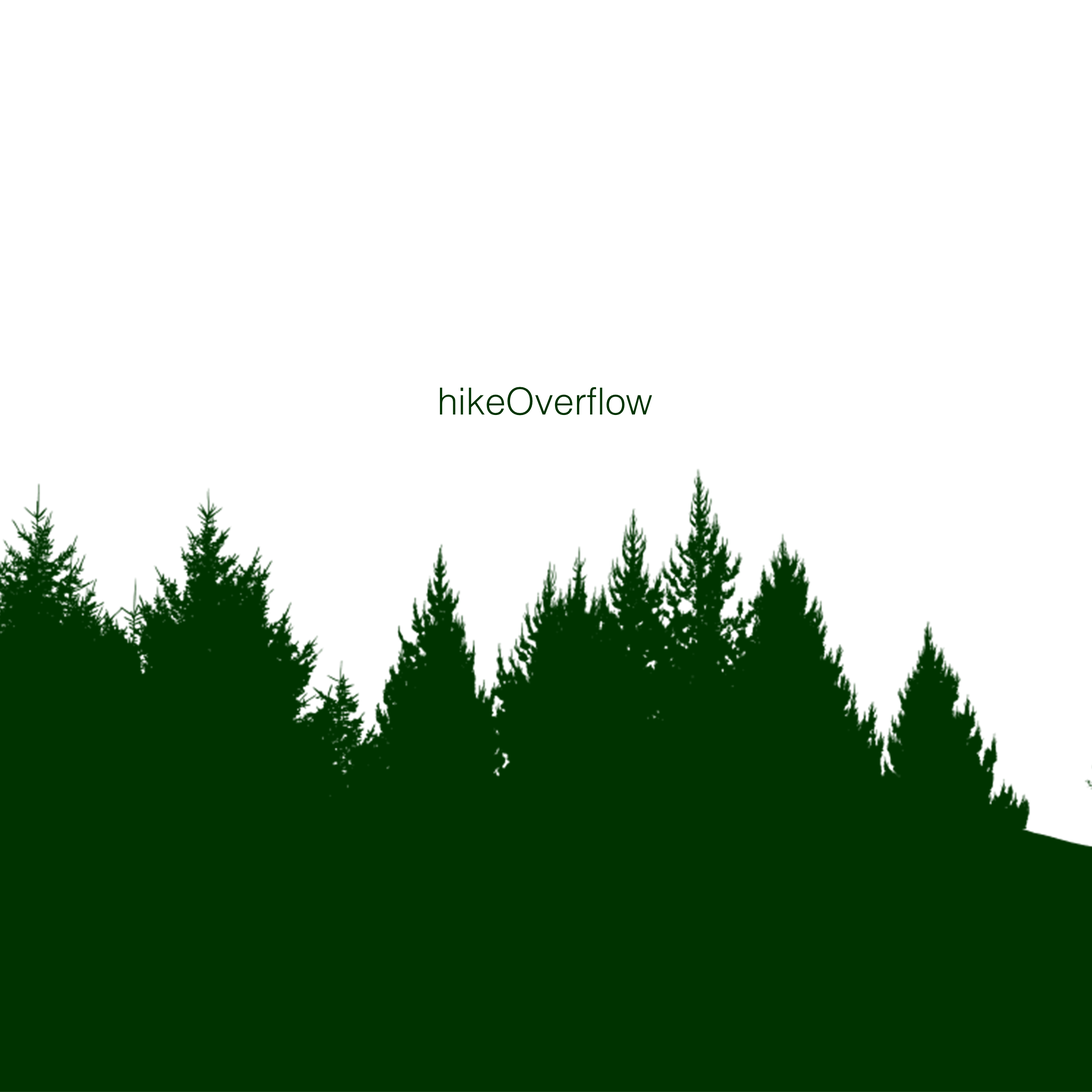
<style>
.page{position:relative;width:1092px;height:1092px;background:#ffffff}
.page>*{position:absolute;margin:0}
.t1{font:37.3px "Helvetica-Light";color:#003300}
</style>
<div class="page">
<p class="t1" style="left:440px;top:387px;width:212px;height:28px">hikeOverflow</p>
</div>
